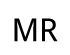
<style>
.page{position:relative;width:70px;height:55px;background:#ffffff}
.page>*{position:absolute;margin:0}
.t1{font:31.8px "DroidSans";color:#000000}
</style>
<div class="page">
<p class="t1" style="left:14px;top:18px;width:44px;height:24px">MR</p>
</div>
